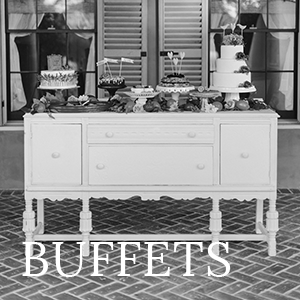
<style>
.page{position:relative;width:300px;height:300px}
.page>*{position:absolute;margin:0}
.t1{font:47.6px "Lora-Regular";letter-spacing:0.025em;color:#ffffff}
</style>
<div class="page">
<p class="t1" style="left:22px;top:242px;width:209px;height:35px">BUFFETS</p>
</div>
